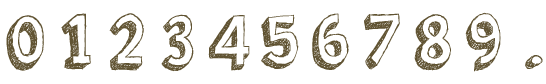
<style>
.page{position:relative;width:546px;height:84px;background:#ffffff}
.page>*{position:absolute;margin:0}
.t1{font:78px "orangejuice";color:#605332}
</style>
<div class="page">
<p class="t1" style="left:6px;top:15px;width:38px;height:56px">0</p>
<p class="t1" style="left:61px;top:13px;width:30px;height:57px">1</p>
<p class="t1" style="left:109px;top:13px;width:35px;height:58px">2</p>
<p class="t1" style="left:161px;top:14px;width:33px;height:58px">3</p>
<p class="t1" style="left:208px;top:15px;width:42px;height:56px">4</p>
<p class="t1" style="left:261px;top:14px;width:38px;height:55px">5</p>
<p class="t1" style="left:312px;top:13px;width:37px;height:57px">6</p>
<p class="t1" style="left:364px;top:13px;width:36px;height:57px">7</p>
<p class="t1" style="left:414px;top:14px;width:37px;height:57px">8</p>
<p class="t1" style="left:465px;top:12px;width:36px;height:60px">9</p>
<p class="t1" style="left:525px;top:55px;width:18px;height:14px">.</p>
</div>
